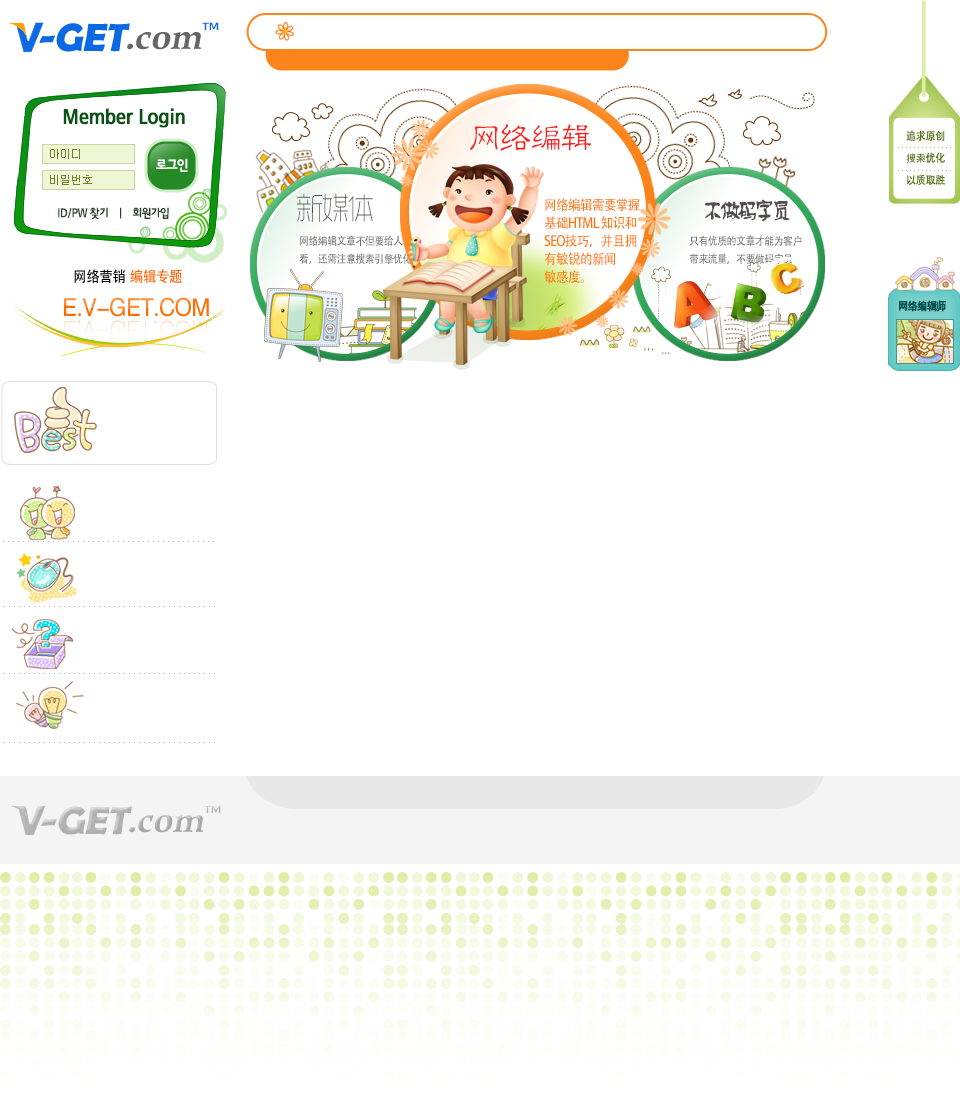
<style>
.page{position:relative;width:960px;height:1100px;background:#ffffff}
.page>*{position:absolute;margin:0}
.t1{font:19.8px "RixBGB";letter-spacing:-0.025em;color:#095312;font-weight:bold;scale:0.91 1}
.t2{font:36px "JXiaoLiSu";letter-spacing:-0.05em;color:#ff1e1e;scale:0.9 1}
.t3{font:11px/22px "AdobeHeitiStd-Regular";letter-spacing:-0.01em;color:#57760b;scale:0.9 1}
.t4{font:11px/22px "Gulim";letter-spacing:-0.01em;color:#57760b;scale:0.9 1}
.t5{font:11px/26px "Dotum";color:#6f8426}
.t6{font:14px "RixBGEB";letter-spacing:-0.05em;color:#ffffff;scale:0.9 1}
.t7{font:30px "RTWSYueGoTrial-ExLight";letter-spacing:-0.05em;color:#554b4b;scale:0.9 1}
.t8{font:14px/18px "AdobeHeitiStd-Regular";letter-spacing:-0.05em;color:#ff7700;scale:0.9 1}
.t9{font:12px "RixBGEB";letter-spacing:-0.05em;color:#2b4329;scale:0.9 1}
.t10{font:24px "FZPHTJW--GB1-0";letter-spacing:-0.2em;color:#554b4b;scale:0.9 1}
.t11{font:11px/18px "AdobeHeitiStd-Regular";letter-spacing:-0.05em;color:#706c6c;scale:0.9 1}
.t12{font:15px "AdobeHeitiStd-Regular";letter-spacing:-0.025em;color:#000000;scale:0.9 1}
.t13{font:15px "AdobeHeitiStd-Regular";letter-spacing:-0.025em;color:#ff6000;scale:0.9 1}
.t14{font:25px "FZHTJW--GB1-0";letter-spacing:-0.025em;color:#ff6c00;scale:0.9 1}
.t15{font:11px "AdobeHeitiStd-Regular";letter-spacing:-0.05em;color:#065552;font-weight:bold;scale:0.9 1}
.t16{font:25px "Gulim";letter-spacing:-0.025em;scale:0.9 1}
</style>
<div class="page">
<p class="t1" style="left:63px;top:108px;width:122px;height:20px">Member Login</p>
<p class="t2" style="left:470px;top:124px;width:122px;height:27px">网络编辑</p>
<p class="t3" style="left:906px;top:130px;width:39px;height:55px">追求原创<br><span class="t4">搜索</span>优化<br>以质取胜</p>
<p class="t5" style="left:50px;top:149px;width:42px;height:36px">아이디<br>비밀번호</p>
<p class="t6" style="left:156px;top:158px;width:32px;height:14px">로그인</p>
<p class="t7" style="left:297px;top:193px;width:76px;height:29px">新媒体</p>
<p class="t8" style="left:544px;top:198px;width:96px;height:85px">网络编辑需要掌握<br>基础HTML 知识和<br>SEO技巧，并且拥<br>有敏锐的新闻<br>敏感度。</p>
<p class="t9" style="left:58px;top:207px;width:111px;height:13px">ID/PW 찾기    |    회원가입</p>
<p class="t10" style="left:704px;top:199px;width:86px;height:22px">不做码字员</p>
<p class="t11" style="left:299px;top:235px;width:113px;height:29px">网络编辑文章不但要给人<br>看，还需注意搜索引擎优化</p>
<p class="t11" style="left:689px;top:235px;width:113px;height:29px">只有优质的文章才能为客户<br>带来流量，不要做码字员</p>
<p class="t12" style="left:74px;top:269px;width:108px;height:15px">网络营销 <span class="t13">编辑专题</span></p>
<p class="t14" style="left:64px;top:297px;width:145px;height:20px">E.V-GET.COM</p>
<p class="t15" style="left:898px;top:300px;width:48px;height:12px">网络编辑师</p>
<p class="t16" style="left:64px;top:320px;width:144px;height:20px">E.V-GET.COM</p>
</div>
